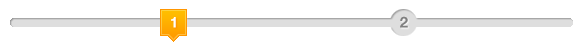
<style>
.page{position:relative;width:586px;height:48px;background:#ffffff}
.page>*{position:absolute;margin:0}
.t1{font:15px "HelveticaNeue-Bold"}
.t2{font:15px "HelveticaNeue-Bold";color:#ffffff}
.t3{font:15px "HelveticaNeue-Bold";color:#808080}
</style>
<div class="page">
<p class="t1" style="left:170px;top:17px;width:5px;height:11px">1</p>
<p class="t2" style="left:171px;top:17px;width:5px;height:11px">1</p>
<p class="t3" style="left:400px;top:16px;width:8px;height:12px">2</p>
</div>
